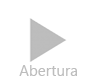
<style>
.page{position:relative;width:96px;height:80px;background:#ffffff}
.page>*{position:absolute;margin:0}
.t1{font:15px "SegoeUI";color:#bdbdbd}
</style>
<div class="page">
<p class="t1" style="left:19px;top:65px;width:58px;height:11px">Abertura</p>
</div>
